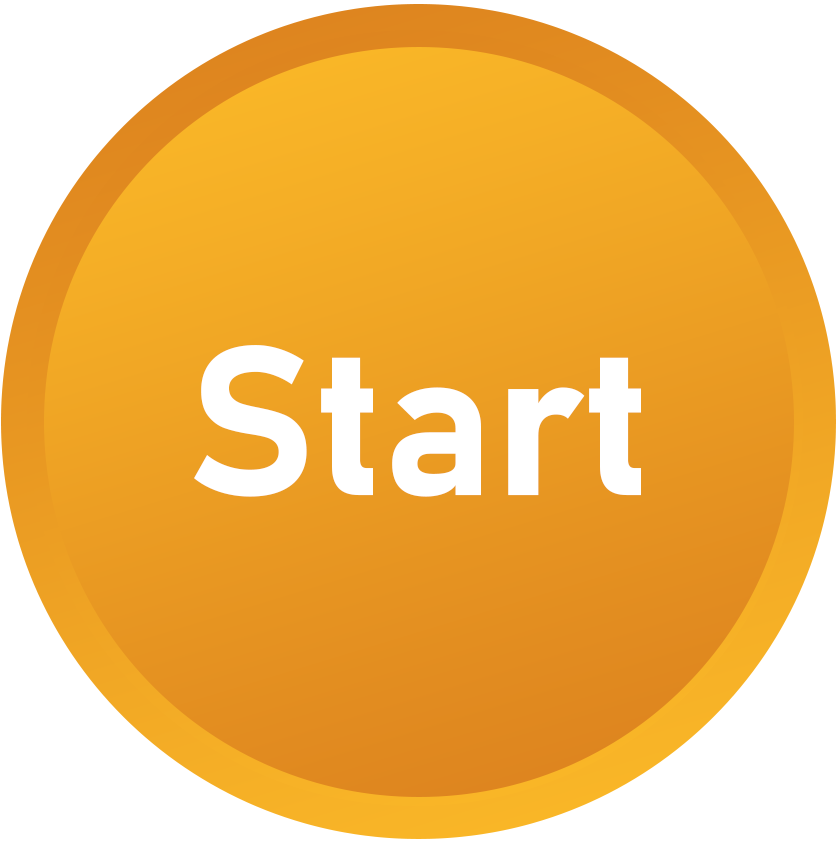
<style>
.page{position:relative;width:837px;height:844px;background:#ffffff}
.page>*{position:absolute;margin:0}
.t1{font:208.7px "Bahnschrift-Bold";color:#ffffff}
</style>
<div class="page">
<p class="t1" style="left:194px;top:345px;width:447px;height:152px">Start</p>
</div>
